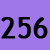
<style>
.page{position:relative;width:50px;height:50px;background:#9f77e8}
.page>*{position:absolute;margin:0}
.t1{font:29.2px "TrebuchetMS";color:#000000;font-weight:bold}
</style>
<div class="page">
<p class="t1" style="left:1px;top:17px;width:47px;height:22px">256</p>
</div>
